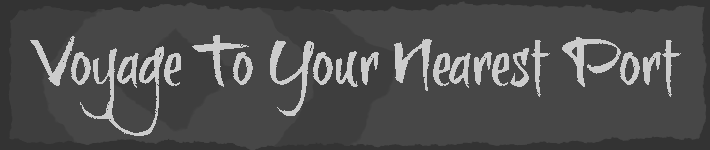
<style>
.page{position:relative;width:710px;height:150px;background:#474747}
.page>*{position:absolute;margin:0}
.t1{font:66.7px "brushtipTexeTRIAL";color:#cccccc}
</style>
<div class="page">
<p class="t1" style="left:30px;top:35px;width:651px;height:101px">Voyage To Your Nearest Port</p>
</div>
